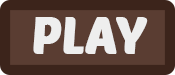
<style>
.page{position:relative;width:175px;height:75px;background:#5a3d32}
.page>*{position:absolute;margin:0}
.t1{font:50px "PoetsenOne-Regular";color:#eeeeee;font-weight:bold}
</style>
<div class="page">
<p class="t1" style="left:33px;top:17px;width:115px;height:37px">PLAY</p>
</div>
